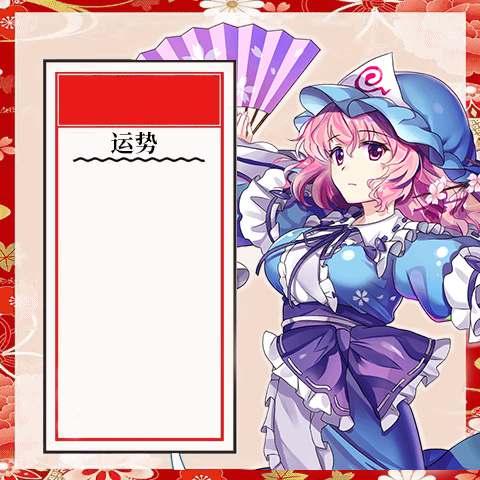
<style>
.page{position:relative;width:480px;height:480px;background:#fcfaf9}
.page>*{position:absolute;margin:0}
.t1{font:24px "NotoSerifSC-Bold";color:#000000}
</style>
<div class="page">
<p class="t1" style="left:111px;top:131px;width:46px;height:23px">运势</p>
</div>
